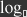
<style>
.page{position:relative;width:27px;height:17px;background:#333333}
.page>*{position:absolute;margin:0}
.t1{font:18px "TimesNewRomanPSMT";color:#ffffff;scale:0.96 1}
</style>
<div class="page">
<p class="t1" style="left:0px;top:0px;width:22px;height:17px">log</p>
</div>
